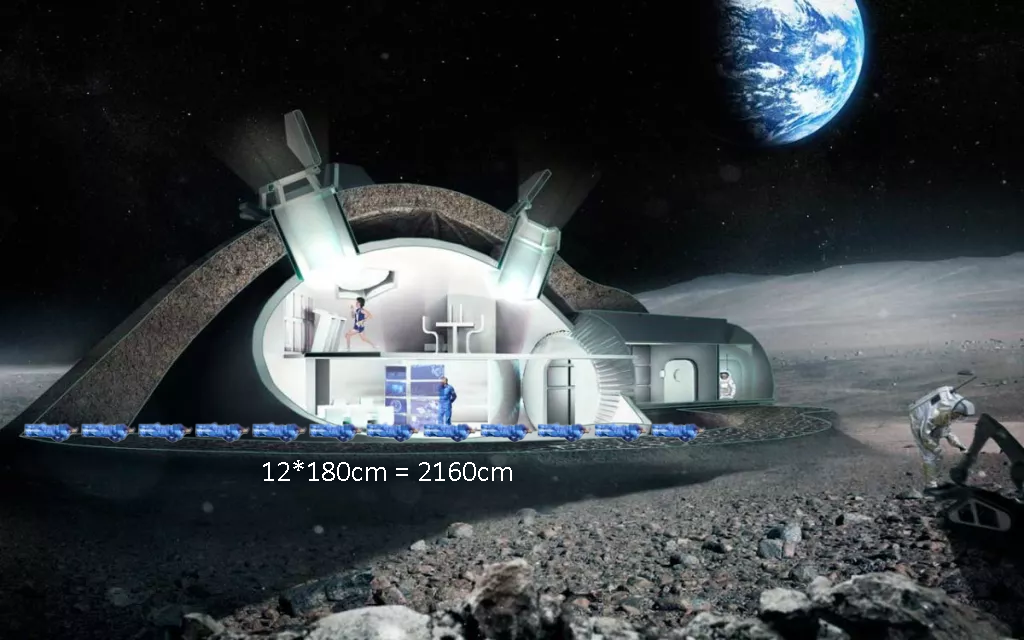
<style>
.page{position:relative;width:1024px;height:640px}
.page>*{position:absolute;margin:0}
.t1{font:30px "Calibri";color:#ffffff}
</style>
<div class="page">
<p class="t1" style="left:263px;top:460px;width:249px;height:21px">12*180cm = 2160cm</p>
</div>
